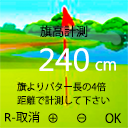
<style>
.page{position:relative;width:128px;height:128px}
.page>*{position:absolute;margin:0}
.t1{font:12.3px "KozGoPr6N-Regular";color:#000000}
.t2{font:31.7px "MicrosoftNewTaiLue";color:#ffffff}
.t3{font:16.4px "KozGoPr6N-Regular";color:#ffffff;scale:0.97 1}
.t4{font:9.4px/13.5px "KozGoPr6N-Regular";color:#000000}
.t5{font:11.9px "MicrosoftNewTaiLue";color:#000000}
.t6{font:11.9px "KozGoPr6N-Regular";color:#000000}
.t7{font:12.3px "KozGoPr6N-Regular";color:#141c00}
.t8{font:12px "KozGoPr6N-Regular";color:#000000}
</style>
<div class="page">
<p class="t1" style="left:40px;top:25px;width:48px;height:12px">旗高計測</p>
<p class="t2" style="left:39px;top:48px;width:50px;height:24px">240</p>
<p class="t3" style="left:95px;top:61px;width:21px;height:10px">cm</p>
<p class="t4" style="left:17px;top:82px;width:93px;height:23px">旗よりパター長の4倍<br>距離で計測して下さい</p>
<p class="t5" style="left:5px;top:111px;width:35px;height:12px">R-<span class="t6">取消</span></p>
<p class="t7" style="left:48px;top:113px;width:10px;height:10px">⊕</p>
<p class="t8" style="left:77px;top:113px;width:10px;height:10px">⊖</p>
<p class="t1" style="left:105px;top:113px;width:17px;height:10px">OK</p>
</div>
